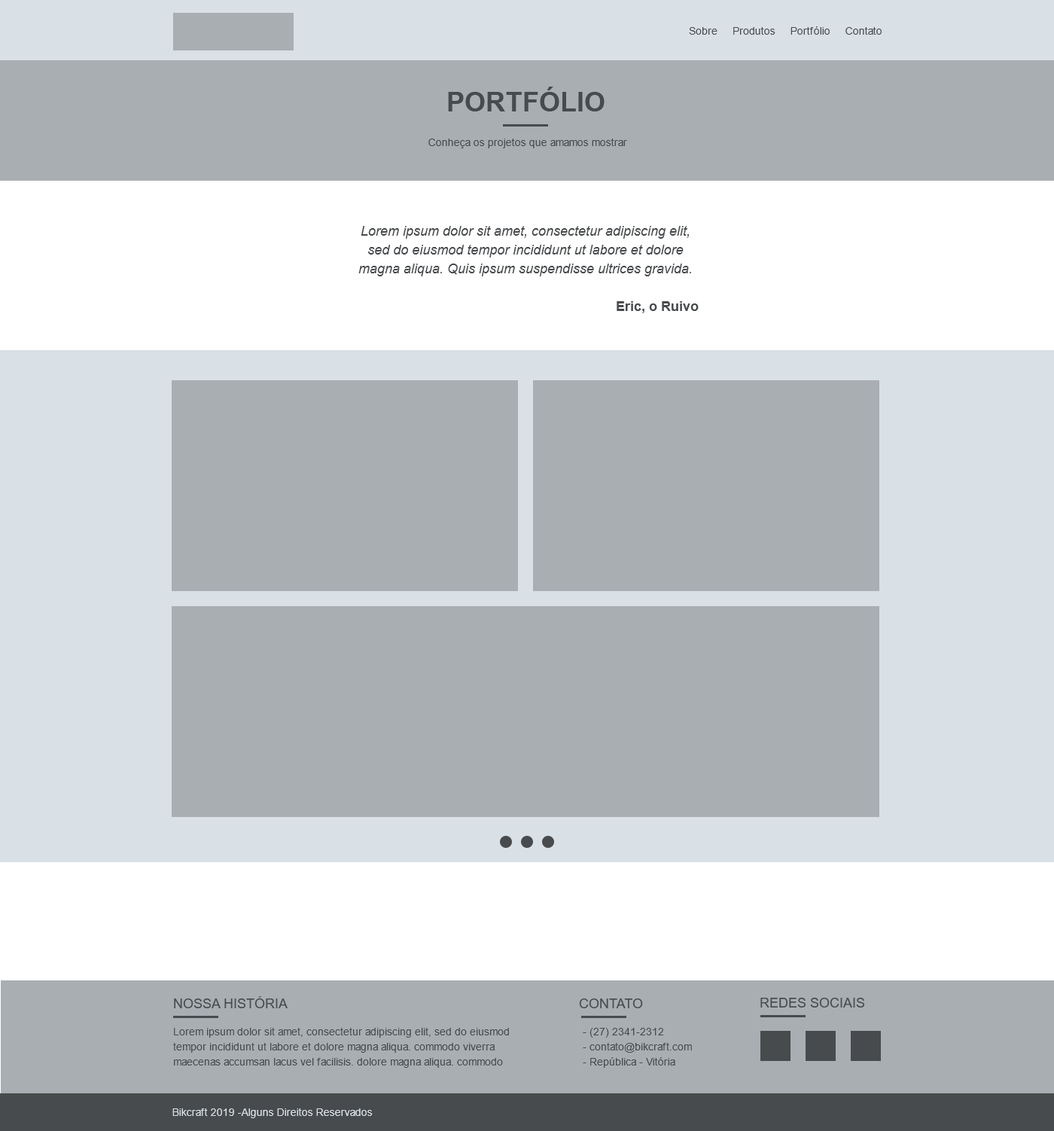
<style>
.page{position:relative;width:1054px;height:1131px;background:#a9aeb3}
.page>*{position:absolute;margin:0}
.t1{font:10.5px "ArialMT";color:#484b4d}
.t2{font:27.1px "Arial-BoldMT";color:#484b4d;text-transform:uppercase}
.t3{font:13.6px/18.8px "Arial-ItalicMT";color:#484b4d}
.t4{font:13.6px/18.8px "Arial-BoldMT";color:#484b4d}
.t5{font:13.6px "ArialMT";color:#484b4d;text-transform:uppercase}
.t6{font:10.5px/15.1px "ArialMT";color:#484b4d}
.t7{font:10.5px "ArialMT";color:#d9e0e6}
</style>
<div class="page">
<p class="t1" style="left:689px;top:26px;width:193px;height:9px">Sobre     Produtos     Portfólio     Contato</p>
<p class="t2" style="left:448px;top:87px;width:157px;height:24px">portfólio</p>
<p class="t1" style="left:428px;top:139px;width:199px;height:9px">Conheça os projetos que amamos mostrar</p>
<p class="t3" style="left:358px;top:226px;width:341px;height:87px;text-align:center">Lorem ipsum dolor sit amet, consectetur adipiscing elit, sed do eiusmod tempor incididunt ut labore et dolore magna aliqua. Quis ipsum suspendisse ultrices gravida.<br><br><span class="t4">Eric, o Ruivo</span></p>
<p class="t5" style="left:174px;top:996px;width:114px;height:12px">Nossa História</p>
<p class="t5" style="left:579px;top:999px;width:64px;height:9px">contato</p>
<p class="t5" style="left:761px;top:998px;width:103px;height:10px">redes sociais</p>
<p class="t6" style="left:173px;top:1028px;width:336px;height:40px">Lorem ipsum dolor sit amet, consectetur adipiscing elit, sed do eiusmod tempor incididunt ut labore et dolore magna aliqua. commodo viverra maecenas accumsan lacus vel facilisis. dolore magna aliqua. commodo</p>
<p class="t6" style="left:583px;top:1028px;width:109px;height:40px">- (27) 2341-2312<br> - contato@bikcraft.com<br> - República - Vitória</p>
<p class="t7" style="left:172px;top:1108px;width:201px;height:10px">Bikcraft 2019 -Alguns Direitos Reservados</p>
</div>
